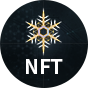
<style>
.page{position:relative;width:88px;height:88px;background:#ffffff}
.page>*{position:absolute;margin:0}
.t1{font:20px "NotoSansKR-Bold";color:#ffffff}
</style>
<div class="page">
<p class="t1" style="left:26px;top:59px;width:37px;height:15px">NFT</p>
</div>
